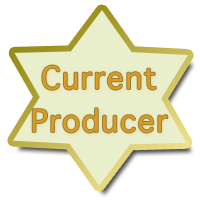
<style>
.page{position:relative;width:200px;height:200px;background:#ffffff}
.page>*{position:absolute;margin:0}
.t1{font:30px "Thonburi";letter-spacing:0.05em;color:#db9c21}
</style>
<div class="page">
<p class="t1" style="left:32px;top:65px;width:136px;height:68px;text-align:center">Current<br>Producer</p>
</div>
